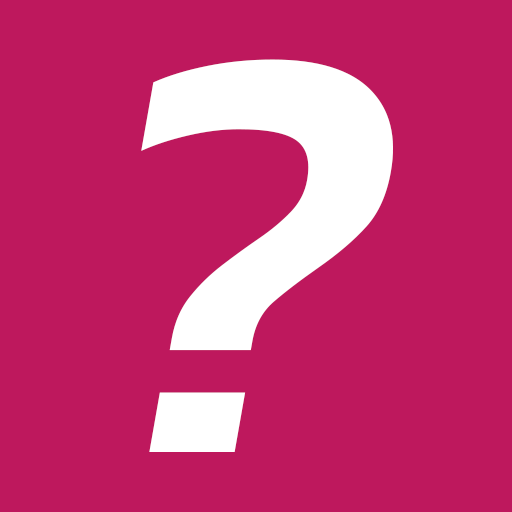
<style>
.page{position:relative;width:512px;height:512px;background:#be185d}
.page>*{position:absolute;margin:0}
.t1{font:600px "Kanit-Medium";color:#ffffff;font-style:italic}
</style>
<div class="page">
<p class="t1" style="left:141px;top:59px;width:252px;height:393px">?</p>
</div>
